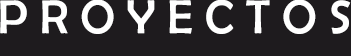
<style>
.page{position:relative;width:351px;height:56px;background:#1e1b1e}
.page>*{position:absolute;margin:0}
.t1{font:48px "BerlinSansFB-Reg";color:#ffffff}
</style>
<div class="page">
<p class="t1" style="left:0px;top:0px;width:351px;height:34px">P R O Y E C T O S</p>
</div>
